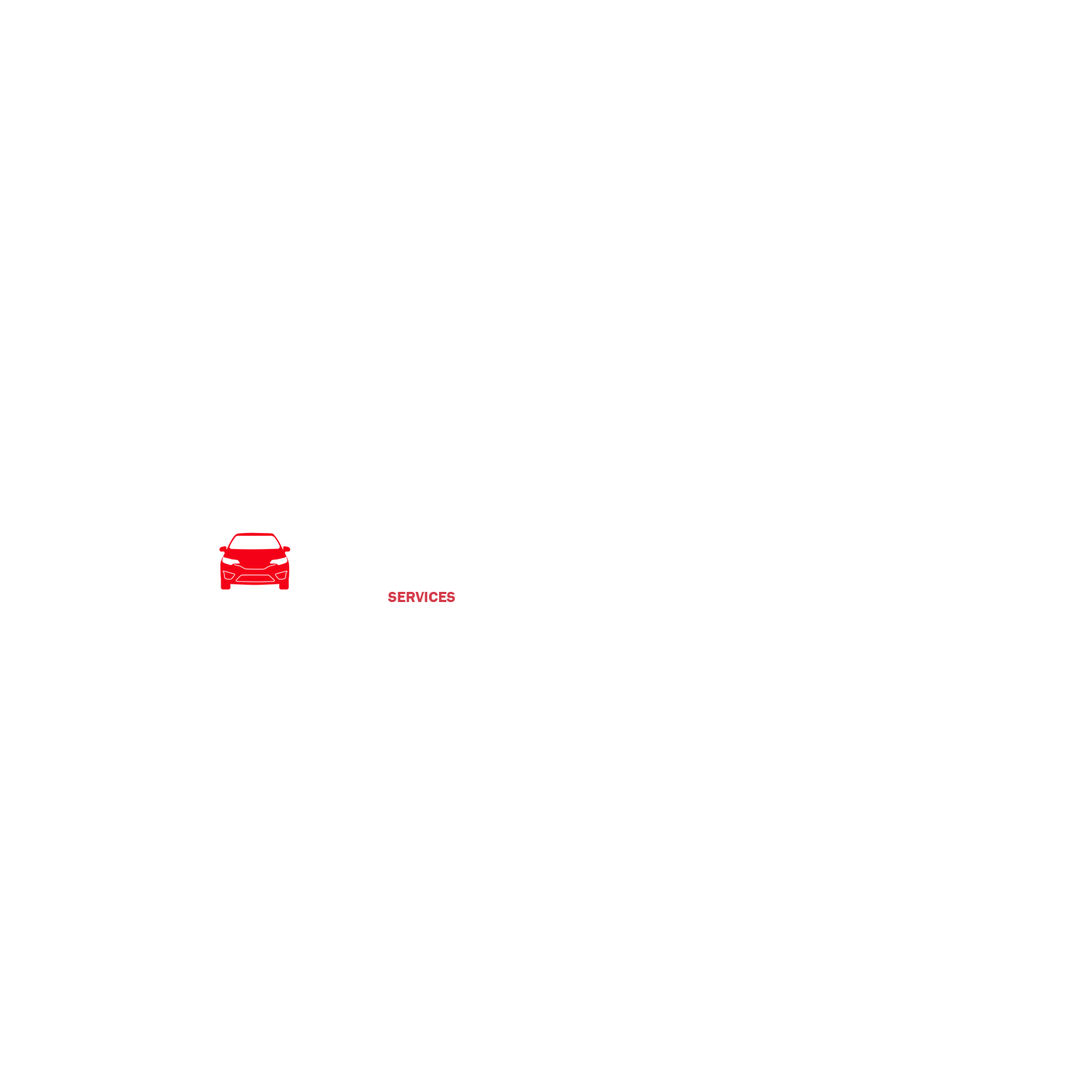
<style>
.page{position:relative;width:1092px;height:1092px;background:#ffffff}
.page>*{position:absolute;margin:0}
.t1{font:15.3px "FranklinGothic-Demi";color:#d43c4b;text-transform:uppercase}
</style>
<div class="page">
<p class="t1" style="left:388px;top:592px;width:67px;height:10px">Services</p>
</div>
